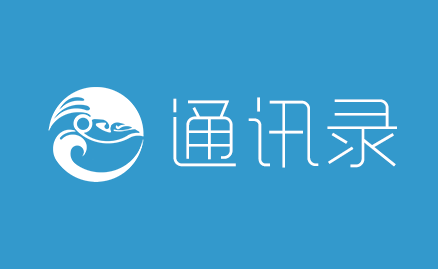
<style>
.page{position:relative;width:438px;height:269px;background:#3399cc}
.page>*{position:absolute;margin:0}
.t1{font:75px "RTWSYueGoTrial-ExLight";letter-spacing:0.05em;color:#ffffff}
</style>
<div class="page">
<p class="t1" style="left:173px;top:97px;width:224px;height:71px">通讯录</p>
</div>
